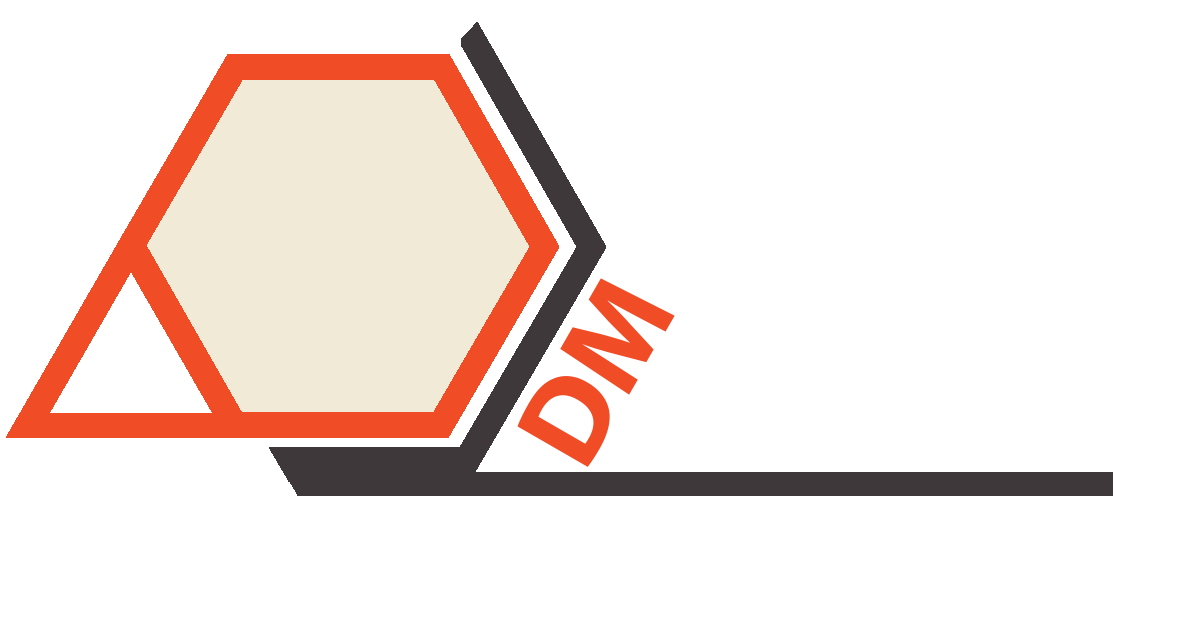
<style>
.page{position:relative;width:1189px;height:639px;background:#ffffff}
.page>*{position:absolute;margin:0}
.t1{font:122.4px "MyriadPro-Bold";color:#f04d27}
</style>
<div class="page">
<p class="t1" style="left:517px;top:278px;width:158px;height:189px;rotate:-60deg">DM</p>
</div>
